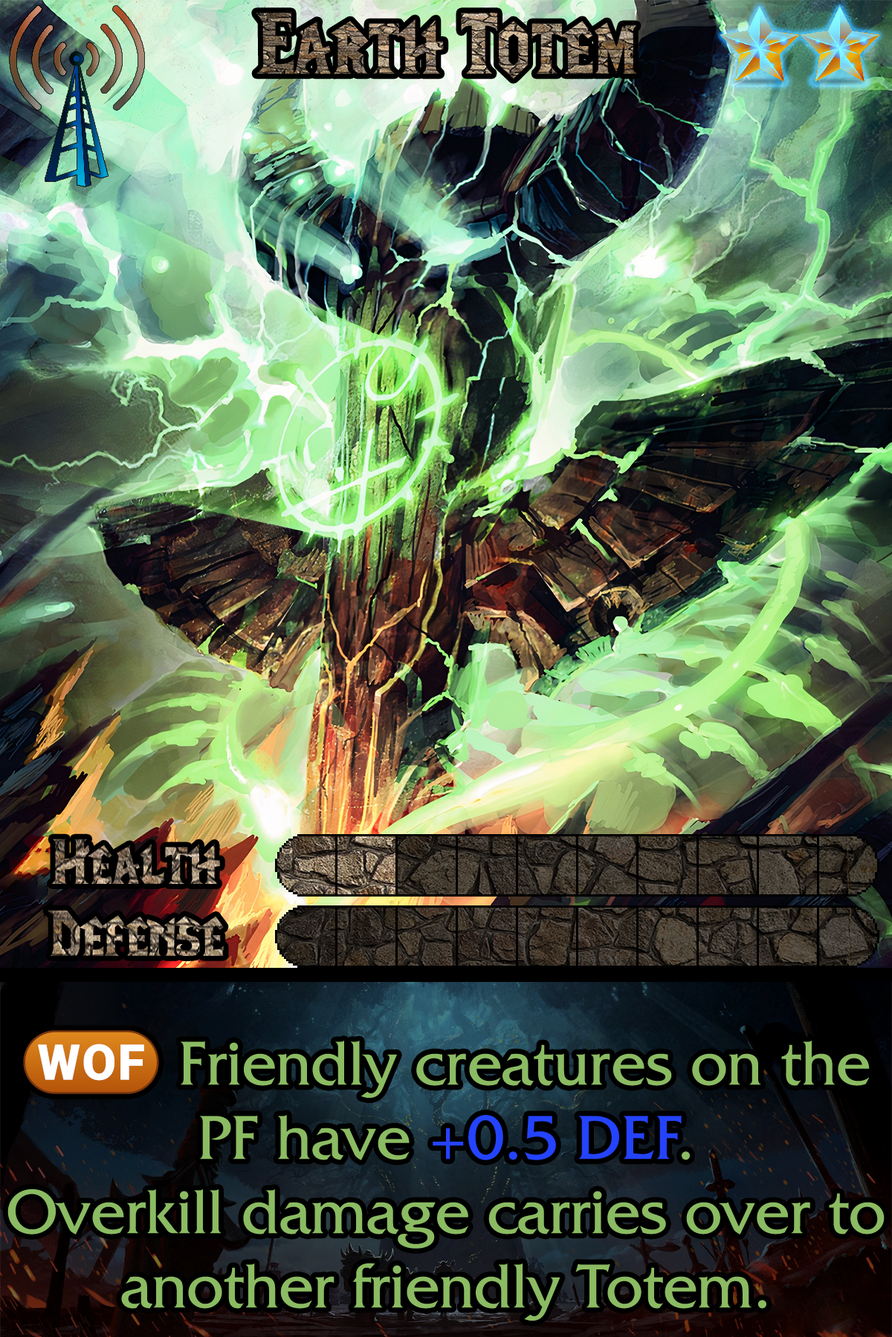
<style>
.page{position:relative;width:892px;height:1337px}
.page>*{position:absolute;margin:0}
.t1{font:148.6px "LifeCraft"}
.t2{font:109.2px "LifeCraft"}
.t3{font:110.7px "LifeCraft"}
.t4{font:111.5px/74.3px "FrizQuadrataStd";color:#8bbb62}
.t5{font:111.5px/74.3px "stoogedings-Regular";color:#8bbb62}
.t6{font:111.5px/74.3px "FrizQuadrataStd";color:#2443ff}
</style>
<div class="page">
<p class="t1" style="left:256px;top:13px;width:381px;height:66px">Earth Totem</p>
<p class="t2" style="left:51px;top:839px;width:169px;height:45px">Health</p>
<p class="t3" style="left:48px;top:910px;width:176px;height:46px">Defense</p>
<p class="t4" style="left:7px;top:1031px;width:877px;height:290px;text-align:center"><span class="t5">(WOF)</span> Friendly creatures on the PF have <span class="t6">+0.5 DEF</span>.<br>Overkill damage carries over to another friendly Totem.</p>
</div>
